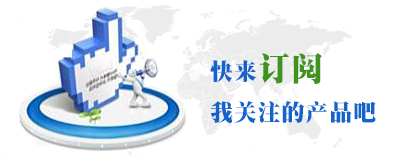
<style>
.page{position:relative;width:400px;height:156px;background:#ffffff}
.page>*{position:absolute;margin:0}
.t1{font:22.7px/48px "SungtiEG-Ultra-GB";letter-spacing:0.05em;color:#1264cb}
.t2{font:32px/48px "SungtiEG-Ultra-GB";letter-spacing:0.05em;color:#3e941c}
</style>
<div class="page">
<p class="t1" style="left:210px;top:53px;width:166px;height:70px">快来<span class="t2">订阅<br></span>我关注的产品吧</p>
</div>
